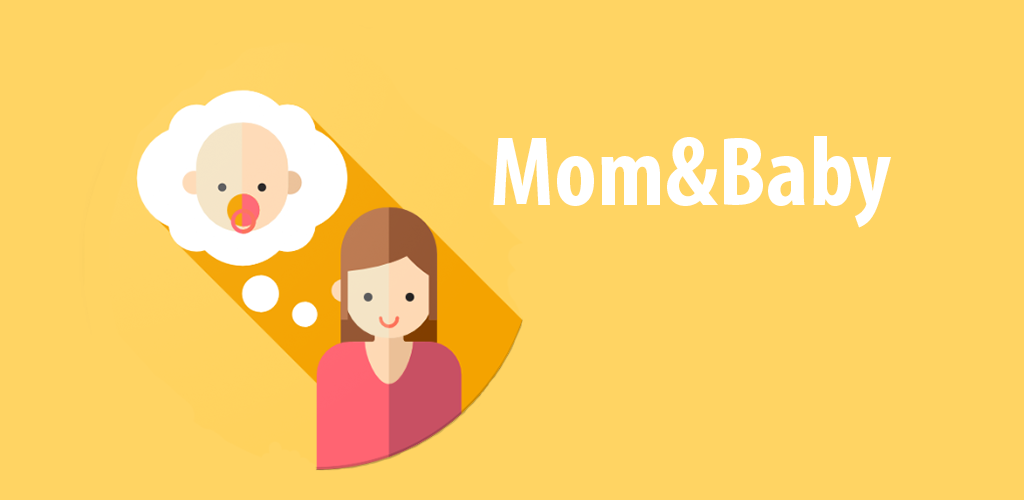
<style>
.page{position:relative;width:1024px;height:500px;background:#ffd463}
.page>*{position:absolute;margin:0}
.t1{font:100px "MyriadPro-BoldCond";color:#ffffff}
</style>
<div class="page">
<p class="t1" style="left:493px;top:136px;width:398px;height:92px">Mom&amp;Baby</p>
</div>
